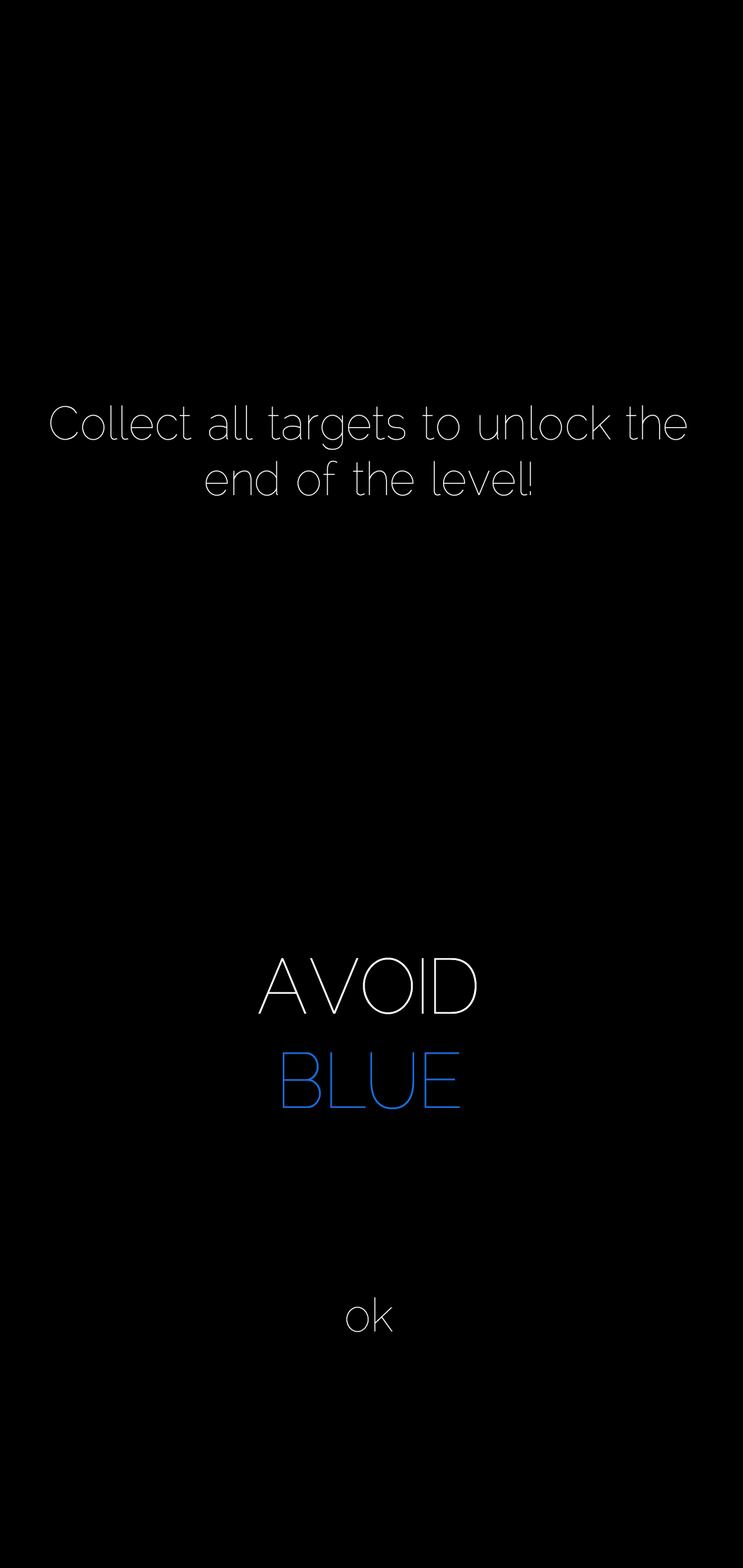
<style>
.page{position:relative;width:743px;height:1568px;background:#000000}
.page>*{position:absolute;margin:0}
.t1{font:46.6px "Raleway-Thin";color:#ffffff;scale:0.96 1}
.t2{font:78.1px "Raleway-Thin";color:#ffffff;scale:0.96 1}
.t3{font:38px "Raleway-Thin";color:#ffffff;scale:0.96 1}
.t4{font:78.1px "Raleway-Thin";color:#1c6ddc;scale:0.96 1}
</style>
<div class="page">
<p class="t1" style="left:50px;top:405px;width:636px;height:91px;text-align:center">Collect all targets to unlock the end of the level!</p>
<p class="t2" style="left:258px;top:957px;width:219px;height:152px;text-align:center"><span class="t3"><br></span>AVOID<br><span class="t4">BLUE</span></p>
<p class="t1" style="left:346px;top:1297px;width:47px;height:35px">ok</p>
</div>
